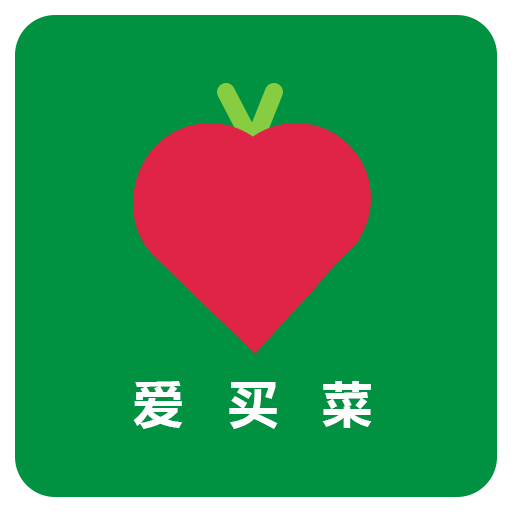
<style>
.page{position:relative;width:512px;height:512px;background:#009141}
.page>*{position:absolute;margin:0}
.t1{font:50px "MicrosoftYaHei-Bold";color:#ffffff}
</style>
<div class="page">
<p class="t1" style="left:133px;top:381px;width:239px;height:48px">爱   买   菜</p>
</div>
